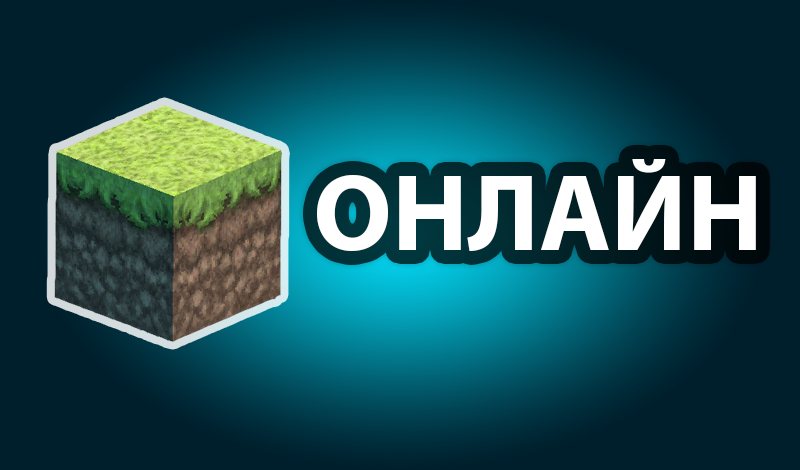
<style>
.page{position:relative;width:800px;height:470px;background:#001f2c}
.page>*{position:absolute;margin:0}
.t1{font:110px "MyriadPro-Bold";color:#ffffff}
</style>
<div class="page">
<p class="t1" style="left:317px;top:159px;width:439px;height:92px">ОНЛАЙН</p>
</div>
